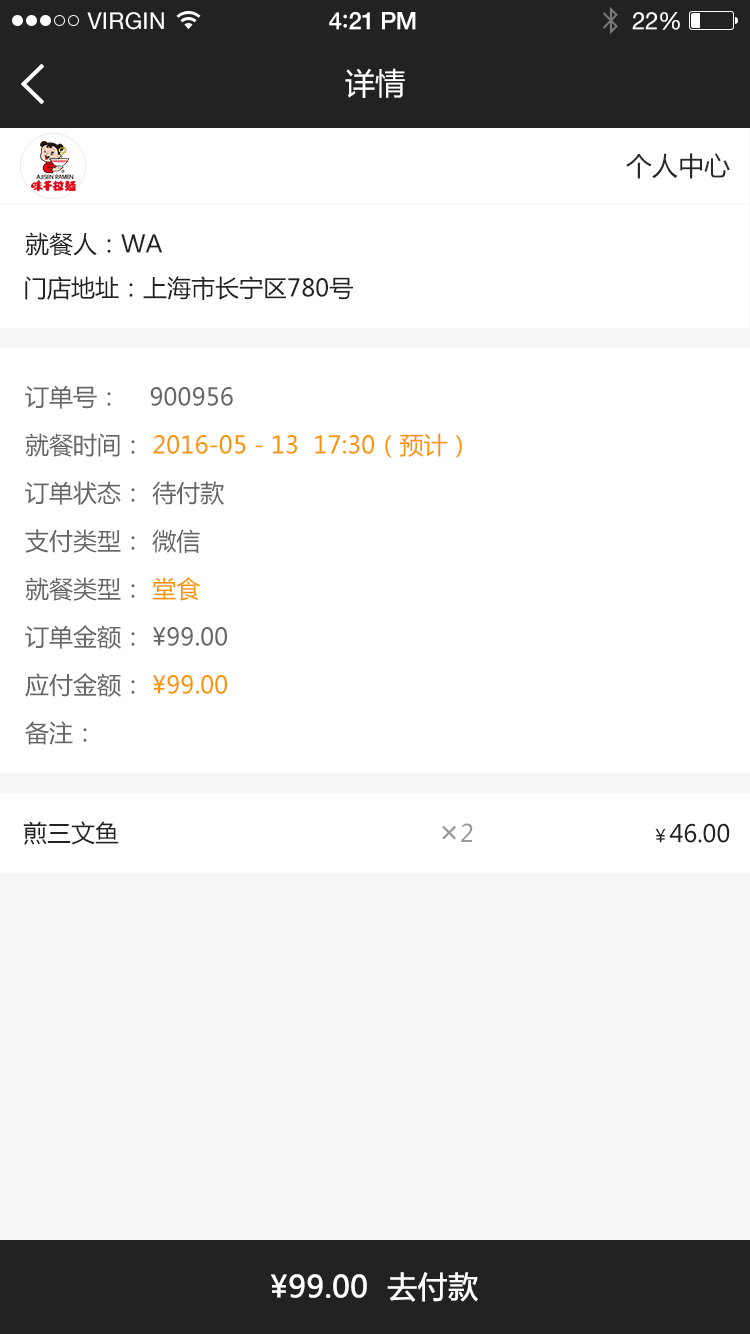
<style>
.page{position:relative;width:750px;height:1334px;background:#ffffff}
.page>*{position:absolute;margin:0}
.t1{font:23px "HelveticaNeue";letter-spacing:0.02em;color:#ffffff}
.t2{font:24px "HelveticaNeue-Medium";letter-spacing:-0.02em;color:#ffffff}
.t3{font:26px "Avenir-Medium";letter-spacing:-0.02em;color:#ffffff}
.t4{font:24px "HelveticaNeue";letter-spacing:-0.02em;color:#ffffff}
.t5{font:30px "MicrosoftYaHei";color:#ffffff}
.t6{font:26px "MicrosoftYaHei";color:#282828}
.t7{font:24px "MicrosoftYaHei";color:#222222}
.t8{font:24px/48px "MicrosoftYaHei";color:#666666}
.t9{font:24px/48px "MicrosoftYaHei";color:#fc9400}
.t10{font:30px "MicrosoftYaHei";letter-spacing:-0.01em;color:#999999}
.t11{font:24px "MicrosoftYaHei";letter-spacing:-0.01em;color:#999999}
.t12{font:24px "MicrosoftYaHei";letter-spacing:-0.01em;color:#222222}
.t13{font:18px "MicrosoftYaHei";letter-spacing:-0.01em;color:#222222}
.t14{font:30px "MicrosoftYaHei";letter-spacing:-0.01em;color:#ffffff;font-weight:bold}
</style>
<div class="page">
<p class="t1" style="left:87px;top:12px;width:77px;height:18px">VIRGIN</p>
<p class="t2" style="left:329px;top:12px;width:87px;height:18px">4<span class="t3">:</span>21 PM</p>
<p class="t4" style="left:632px;top:12px;width:48px;height:18px">22%</p>
<p class="t5" style="left:345px;top:68px;width:60px;height:30px">详情</p>
<p class="t6" style="left:626px;top:153px;width:104px;height:26px">个人中心</p>
<p class="t7" style="left:25px;top:232px;width:138px;height:24px">就餐人：WA</p>
<p class="t7" style="left:25px;top:276px;width:328px;height:24px">门店地址：上海市长宁区780号</p>
<p class="t8" style="left:25px;top:385px;width:437px;height:360px">订单号：    900956<br>就餐时间： <span class="t9">2016-05－13  17:30（预计）<br></span>订单状态： 待付款<br>支付类型： 微信<br>就餐类型： <span class="t9">堂食<br></span>订单金额： ¥99.00<br>应付金额： <span class="t9">¥99.00<br></span>备注：</p>
<p class="t7" style="left:23px;top:821px;width:96px;height:24px">煎三文鱼</p>
<p class="t10" style="left:442px;top:823px;width:31px;height:19px">×<span class="t11">2</span></p>
<p class="t12" style="left:655px;top:823px;width:75px;height:20px"><span class="t13">￥</span>46.00</p>
<p class="t14" style="left:271px;top:1272px;width:207px;height:30px">¥99.00  去付款</p>
</div>
